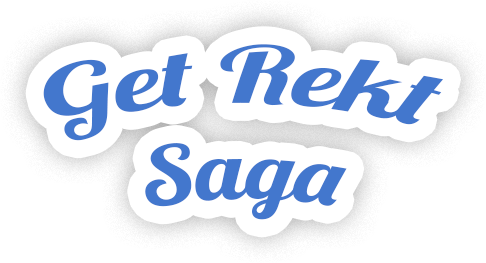
<style>
.page{position:relative;width:486px;height:263px;background:#ffffff}
.page>*{position:absolute;margin:0}
.t1{font:75px "Lobster1.4";color:#4377cd}
</style>
<div class="page">
<p class="t1" style="left:43px;top:44px;width:401px;height:176px;text-align:center">Get Rekt<br>Saga</p>
</div>
